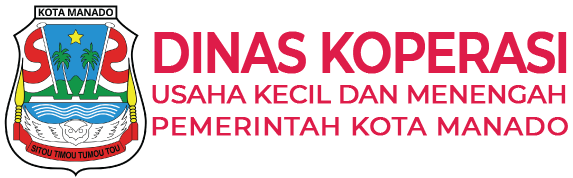
<style>
.page{position:relative;width:573px;height:178px;background:#ffffff}
.page>*{position:absolute;margin:0}
.t1{font:26px "Montserrat-Medium";letter-spacing:-0.03em;color:#de1c49;font-weight:bold}
.t2{font:57.1px/45.8px "Montserrat-SemiBold";letter-spacing:-0.045em;color:#de1c49;font-weight:bold;scale:0.84 1}
.t3{font:57.1px "Montserrat-SemiBold";letter-spacing:-0.045em;color:#de1c49;font-weight:bold;scale:0.84 1}
.t4{font:26px "Montserrat-Medium";letter-spacing:0.015em;color:#de1c49;font-weight:bold}
.t5{font:26px/25.2px "Montserrat-Medium";letter-spacing:0.015em;color:#de1c49;font-weight:bold}
</style>
<div class="page">
<p class="t1" style="left:152px;top:31px;width:416px;height:105px"><span class="t2">D</span><span class="t3">INAS KOPERASI<br></span>USAHA KECIL DAN MENENGAH<br><span class="t4">PEMERINTAH KO</span><span class="t5">TA MANADO</span></p>
</div>
